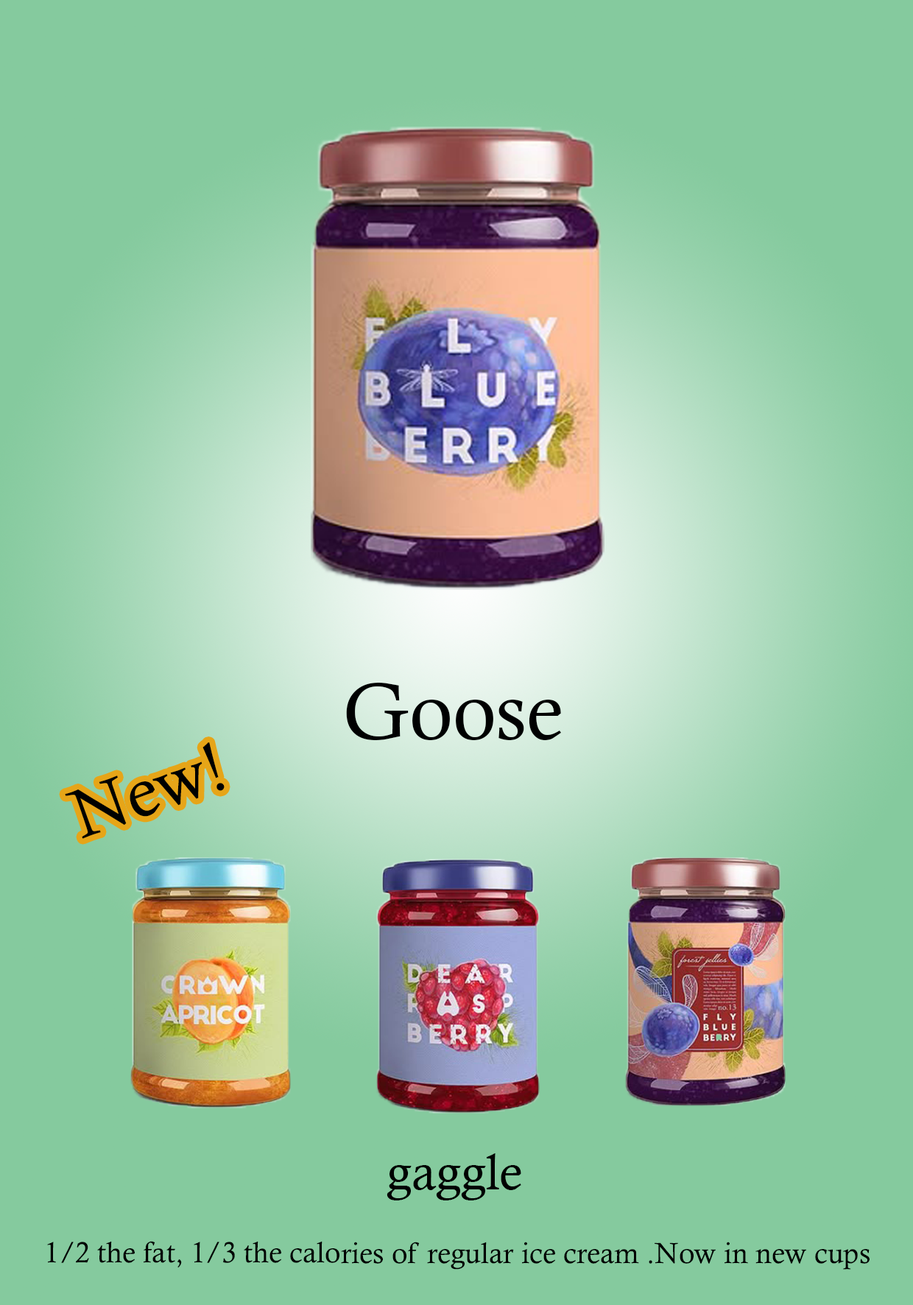
<style>
.page{position:relative;width:913px;height:1305px;background:#85ca9e}
.page>*{position:absolute;margin:0}
.t1{font:80px "CalistoMT";color:#000101}
.t2{font:69.1px "CalistoMT";color:#000101}
.t3{font:50.6px "CalistoMT";color:#000101}
.t4{font:29.3px "CalistoMT";color:#000101}
</style>
<div class="page">
<p class="t1" style="left:346px;top:683px;width:215px;height:57px">Goose</p>
<p class="t2" style="left:65px;top:743px;width:160px;height:96px;rotate:-19deg">New!</p>
<p class="t3" style="left:387px;top:1154px;width:135px;height:47px">gaggle</p>
<p class="t4" style="left:47px;top:1241px;width:823px;height:29px">1/2 the fat, 1/3 the calories of regular ice cream .Now in new cups</p>
</div>
